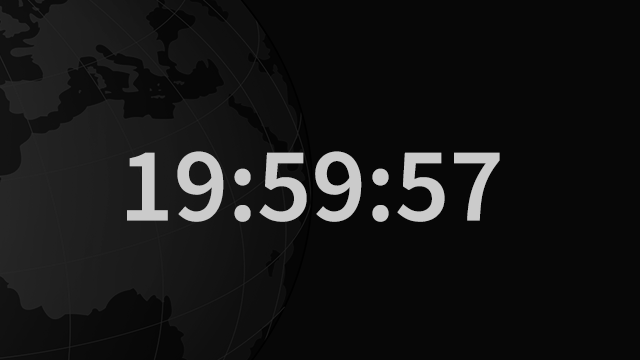
<style>
.page{position:relative;width:640px;height:360px;background:#070707}
.page>*{position:absolute;margin:0}
.t1{font:106px "SourceSansPro-Semibold";color:#cbcbcb}
</style>
<div class="page">
<p class="t1" style="left:127px;top:151px;width:373px;height:71px">19:59:57</p>
</div>
